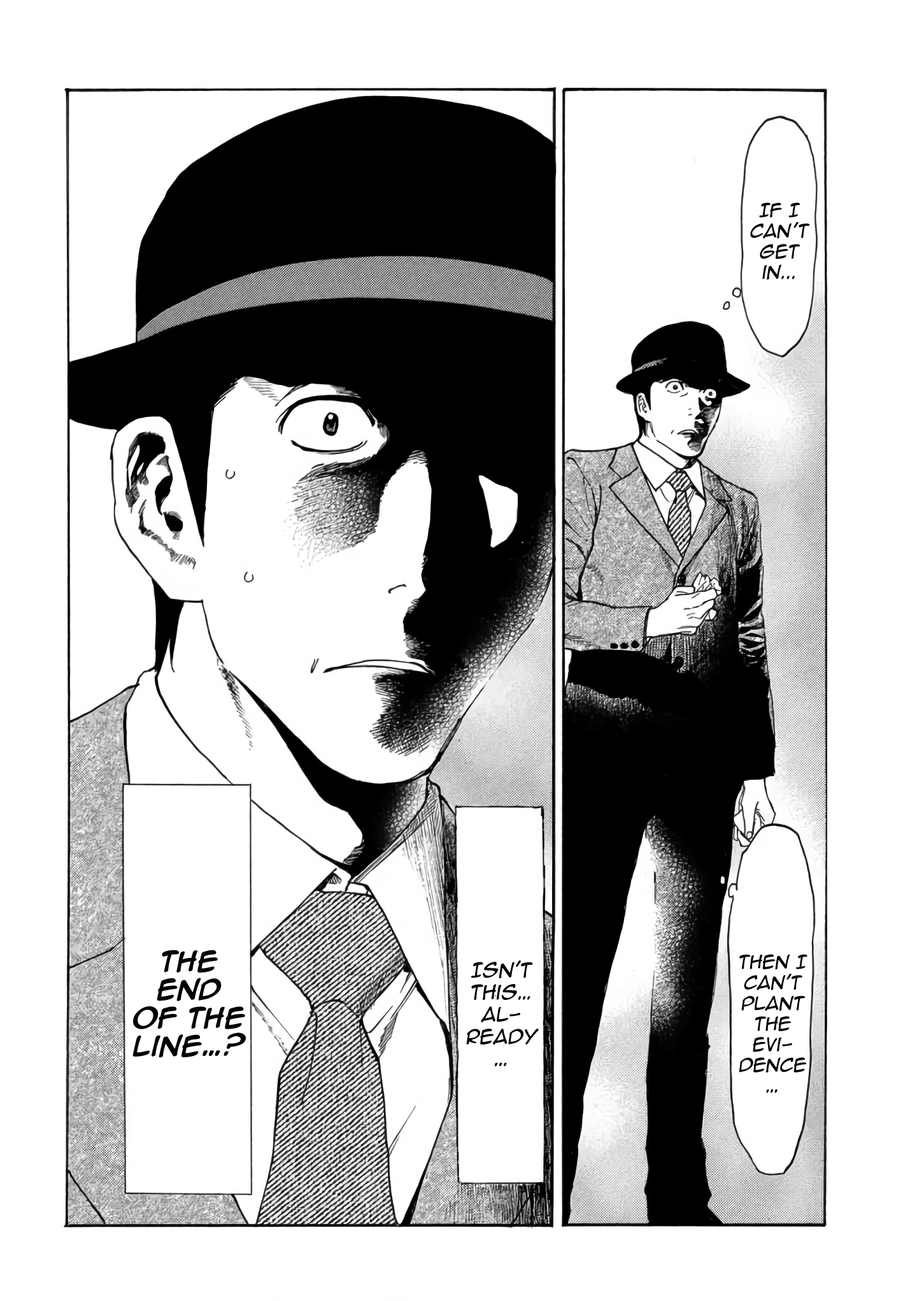
<style>
.page{position:relative;width:917px;height:1301px;background:#ffffff}
.page>*{position:absolute;margin:0}
.t1{font:17.2px "AnimeAce2.0BB";color:#030303;font-style:italic}
.t2{font:23.6px "AnimeAce2.0BB-Bold";color:#030303}
.t3{font:18.5px "AnimeAce2.0BB";color:#030303;font-style:italic}
</style>
<div class="page">
<p class="t1" style="left:750px;top:202px;width:60px;height:78px;text-align:center">If I can’t get <br>in...</p>
<p class="t2" style="left:132px;top:950px;width:114px;height:108px;text-align:center">the end of the line…?</p>
<p class="t3" style="left:466px;top:960px;width:72px;height:107px;text-align:center">Isn't this…<br>already…</p>
<p class="t1" style="left:738px;top:954px;width:69px;height:139px;text-align:center">Then I can't plant the <br>evidence…</p>
</div>
